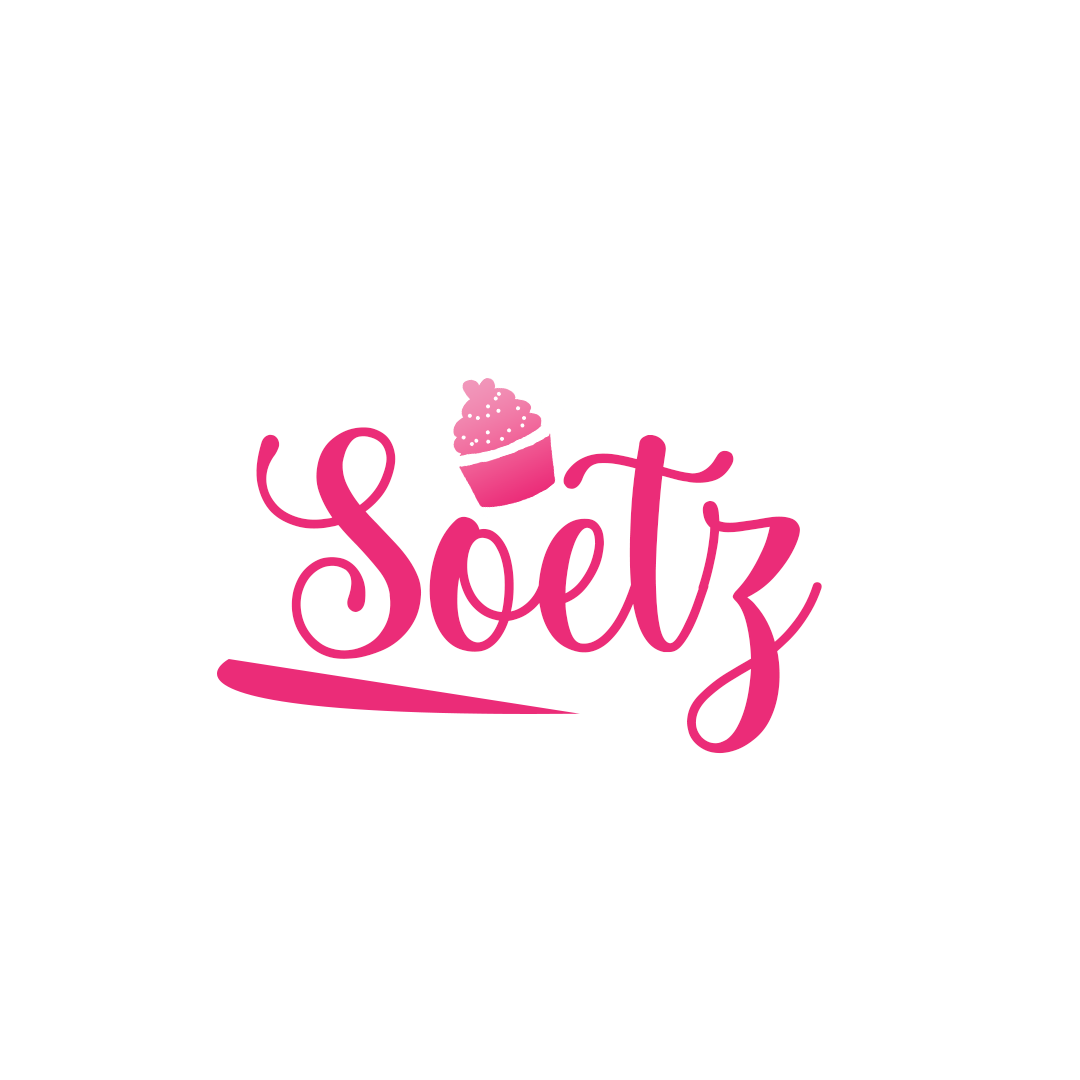
<style>
.page{position:relative;width:1080px;height:1080px;background:#ffffff}
.page>*{position:absolute;margin:0}
.t1{font:340.2px "josephsophia";color:#eb2c78}
</style>
<div class="page">
<p class="t1" style="left:256px;top:427px;width:566px;height:327px">Soetz</p>
</div>
